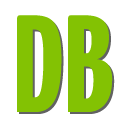
<style>
.page{position:relative;width:128px;height:128px;background:#ffffff}
.page>*{position:absolute;margin:0}
.t1{font:138px "YanoneKaffeesatz-Bold";color:#83c203}
</style>
<div class="page">
<p class="t1" style="left:17px;top:15px;width:96px;height:97px">DB</p>
<p class="t1" style="left:19px;top:17px;width:96px;height:97px">DB</p>
</div>
